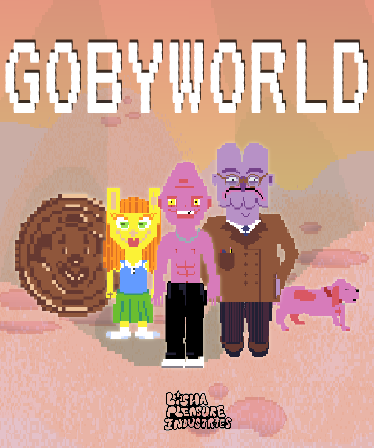
<style>
.page{position:relative;width:374px;height:448px}
.page>*{position:absolute;margin:0}
.t1{font:125.8px "VT323-Regular";color:#ffffff;scale:0.82 1}
</style>
<div class="page">
<p class="t1" style="left:5px;top:42px;width:363px;height:71px">GOBYWORLD</p>
</div>
